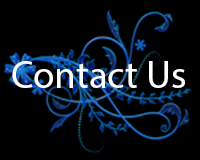
<style>
.page{position:relative;width:200px;height:160px;background:#000000}
.page>*{position:absolute;margin:0}
.t1{font:38.7px "MyriadPro-Regular";color:#ffffff}
</style>
<div class="page">
<p class="t1" style="left:12px;top:61px;width:173px;height:27px">Contact Us</p>
</div>
